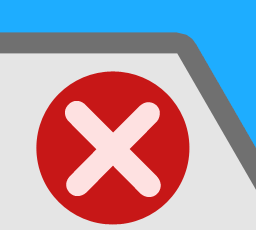
<style>
.page{position:relative;width:256px;height:230px;background:#e5e5e5}
.page>*{position:absolute;margin:0}
.t1{font:230px "Courier-Bold";letter-spacing:-0.025em;color:#fee1e1}
</style>
<div class="page">
<p class="t1" style="left:65px;top:101px;width:96px;height:96px">×</p>
</div>
